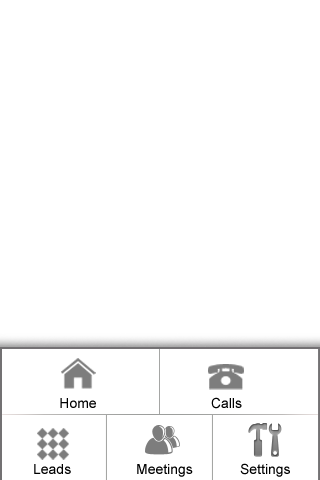
<style>
.page{position:relative;width:320px;height:480px;background:#ffffff}
.page>*{position:absolute;margin:0}
.t1{font:14px "ArialMT";color:#000000}
</style>
<div class="page">
<p class="t1" style="left:60px;top:398px;width:36px;height:10px">Home</p>
<p class="t1" style="left:211px;top:397px;width:31px;height:12px">Calls</p>
<p class="t1" style="left:34px;top:464px;width:37px;height:10px">Leads</p>
<p class="t1" style="left:137px;top:464px;width:56px;height:13px">Meetings</p>
<p class="t1" style="left:240px;top:463px;width:50px;height:14px">Settings</p>
</div>
